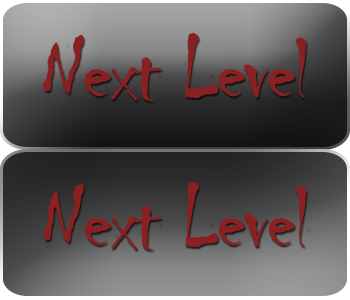
<style>
.page{position:relative;width:350px;height:300px}
.page>*{position:absolute;margin:0}
.t1{font:89.9px "Chiller-Regular";letter-spacing:-0.025em;color:#892122}
</style>
<div class="page">
<p class="t1" style="left:43px;top:33px;width:266px;height:68px">Next Level</p>
<p class="t1" style="left:43px;top:182px;width:266px;height:68px">Next Level</p>
</div>
